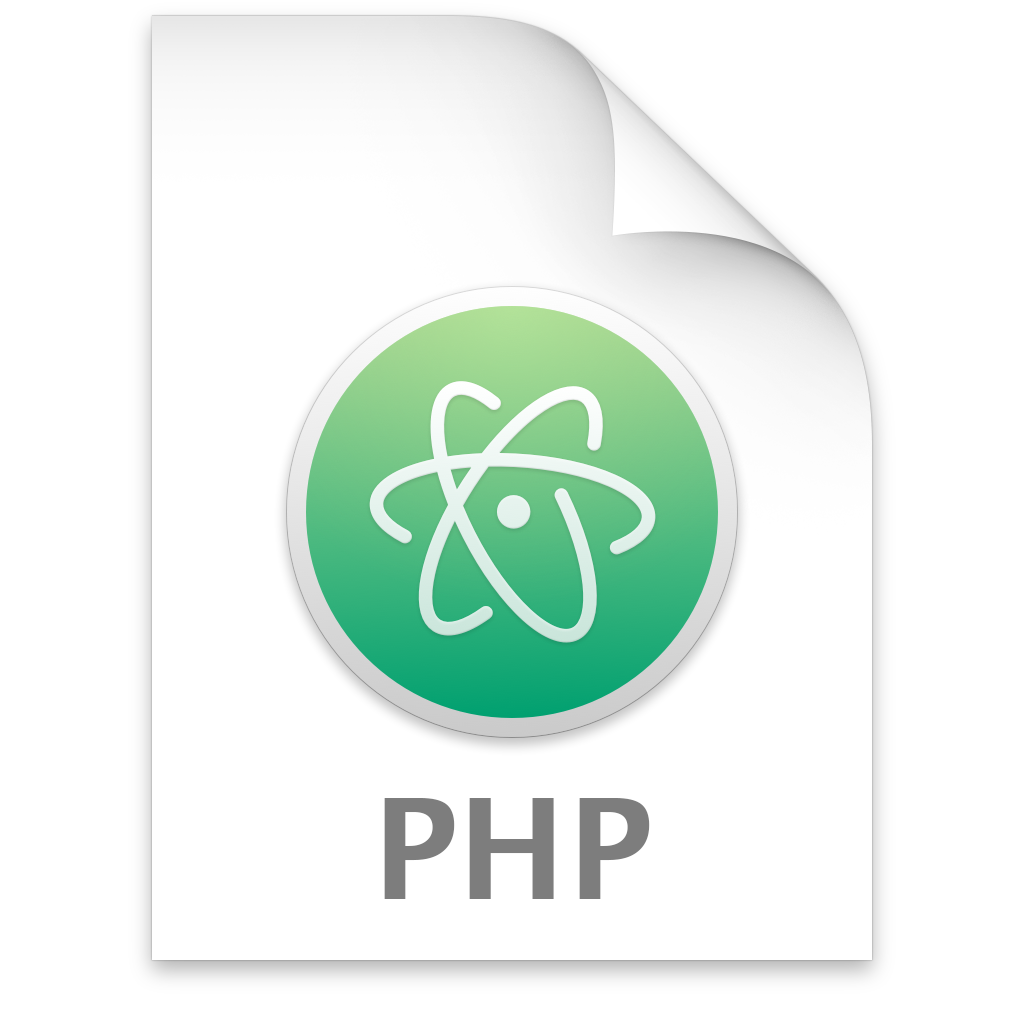
<style>
.page{position:relative;width:1024px;height:1024px;background:#ffffff}
.page>*{position:absolute;margin:0}
.t1{font:140px "LucidaGrande-Bold";color:#7d7d7d}
</style>
<div class="page">
<p class="t1" style="left:384px;top:798px;width:266px;height:101px">PHP</p>
</div>
